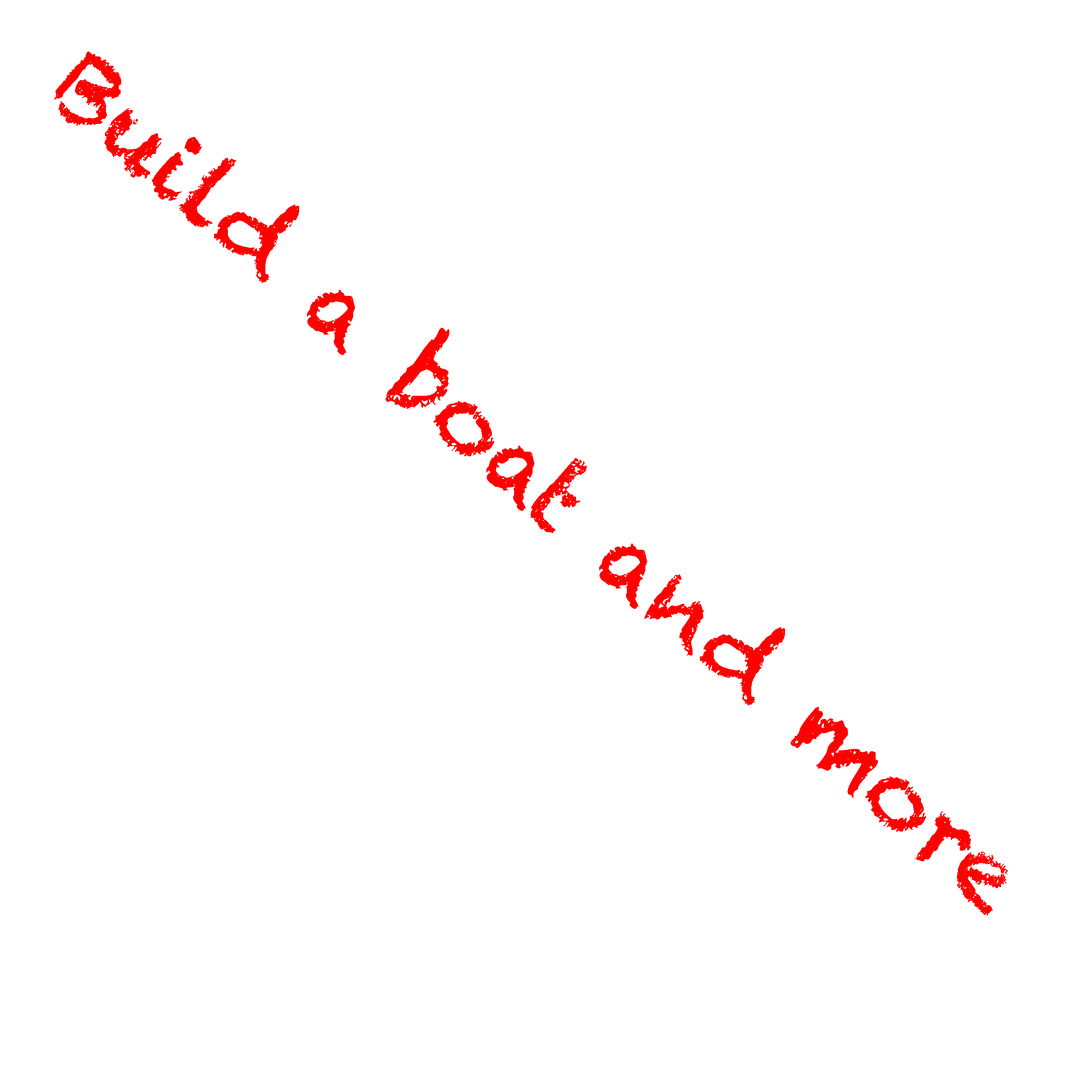
<style>
.page{position:relative;width:1092px;height:1092px;background:#ffffff}
.page>*{position:absolute;margin:0}
.t1{font:95px "Chalkduster";color:#ff0000}
</style>
<div class="page">
<p class="t1" style="left:54px;top:51px;width:954px;height:865px;rotate:41deg">Build a boat and more</p>
</div>
